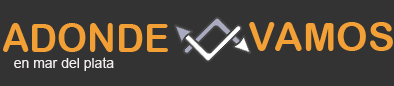
<style>
.page{position:relative;width:394px;height:86px;background:#333333}
.page>*{position:absolute;margin:0}
.t1{font:40px "ArialRoundedMTBold";color:#f2a036;scale:0.95 1}
.t2{font:40px "ArialRoundedMTBold";color:#f3a136}
.t3{font:14px "ArialMT";color:#f4eeee}
</style>
<div class="page">
<p class="t1" style="left:3px;top:23px;width:165px;height:29px">ADONDE</p>
<p class="t2" style="left:249px;top:22px;width:144px;height:29px">VAMOS</p>
<p class="t3" style="left:14px;top:57px;width:100px;height:14px">en mar del plata</p>
</div>
